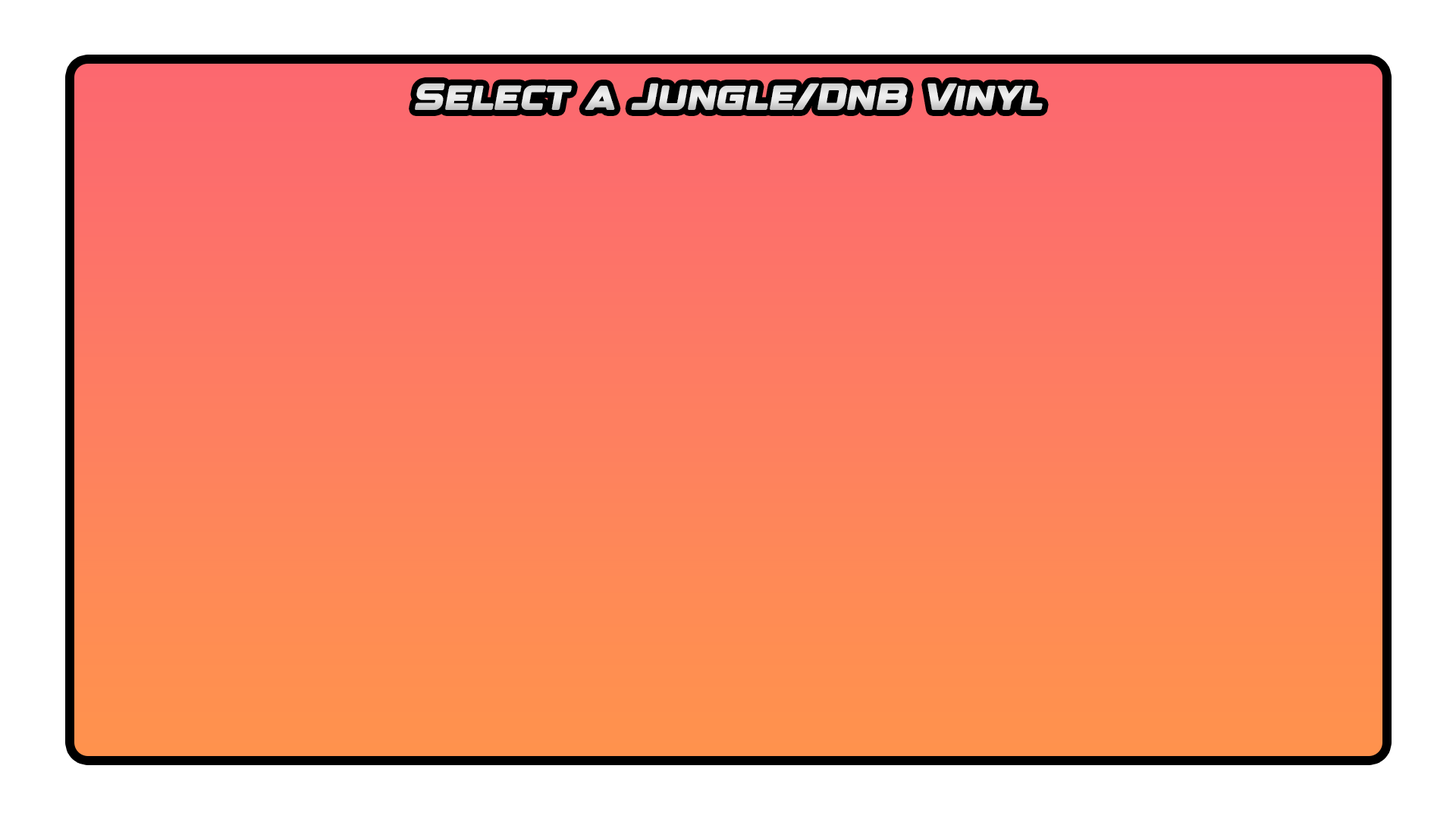
<style>
.page{position:relative;width:1456px;height:819px;background:#ffffff}
.page>*{position:absolute;margin:0}
.t1{font:37.9px "DesignerRegular";color:#dfdfdf}
</style>
<div class="page">
<p class="t1" style="left:415px;top:83px;width:628px;height:27px">Select a Jungle/DnB Vinyl</p>
</div>
